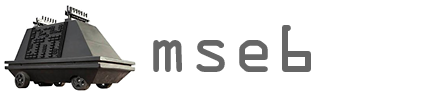
<style>
.page{position:relative;width:430px;height:97px;background:#ffffff}
.page>*{position:absolute;margin:0}
.t1{font:60px "OCRAStd";color:#666666}
</style>
<div class="page">
<p class="t1" style="left:153px;top:25px;width:158px;height:47px">mse6</p>
</div>
